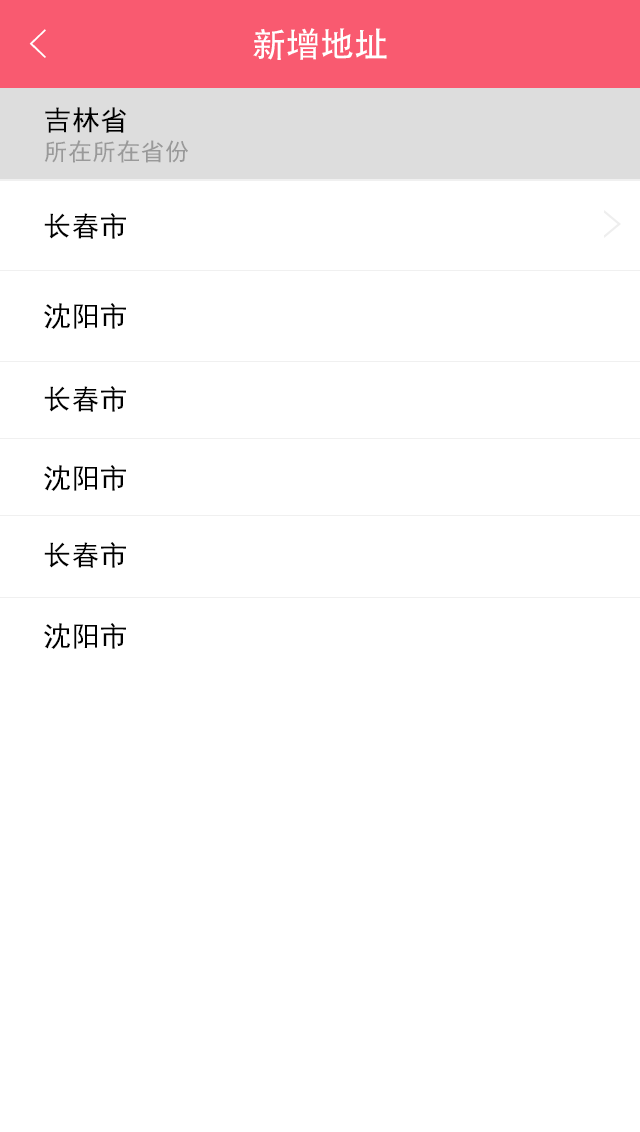
<style>
.page{position:relative;width:640px;height:1132px;background:#ffffff}
.page>*{position:absolute;margin:0}
.t1{font:40px "FZYXJW--GB1-0";color:#ffffff}
.t2{font:34px "AdobeHeitiStd-Regular";color:#ffffff}
.t3{font:28px "SimHei";letter-spacing:0.01em;color:#000000}
.t4{font:24px "SimHei";letter-spacing:0.01em;color:#999999}
</style>
<div class="page">
<p class="t1" style="left:29px;top:29px;width:17px;height:29px">&lt;</p>
<p class="t2" style="left:253px;top:28px;width:134px;height:32px">新增地址</p>
<p class="t3" style="left:45px;top:107px;width:82px;height:26px">吉林省</p>
<p class="t4" style="left:44px;top:140px;width:144px;height:23px">所在所在省份</p>
<p class="t3" style="left:44px;top:213px;width:82px;height:26px">长春市</p>
<p class="t3" style="left:44px;top:303px;width:82px;height:26px">沈阳市</p>
<p class="t3" style="left:44px;top:386px;width:82px;height:26px">长春市</p>
<p class="t3" style="left:44px;top:465px;width:82px;height:26px">沈阳市</p>
<p class="t3" style="left:44px;top:542px;width:82px;height:26px">长春市</p>
<p class="t3" style="left:44px;top:623px;width:82px;height:26px">沈阳市</p>
</div>
